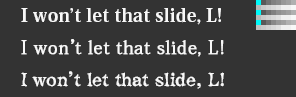
<style>
.page{position:relative;width:296px;height:97px;background:#333333}
.page>*{position:absolute;margin:0}
.t1{font:18px/32px "KozMinPro-Heavy";letter-spacing:0.022em;color:#f8f8f8}
.t2{font:18px/32px "AdobeFangsongStd-Regular";letter-spacing:0.028em;color:#f8f8f8;font-weight:bold}
.t3{font:18px/32px "AdobeFangsongStd-Regular";letter-spacing:-0.7em;color:#f8f8f8;font-weight:bold}
.t4{font:18px/32px "ComicMysteryStd-DB";letter-spacing:-0.006em;color:#f8f8f8}
.t5{font:18px/32px "ComicMysteryStd-DB";letter-spacing:-0.001em;color:#f8f8f8}
</style>
<div class="page">
<p class="t1" style="left:21px;top:8px;width:203px;height:81px">I won’t let that slide, L!<br><span class="t2">I won</span><span class="t3">’</span><span class="t2">t let that slide, L!<br></span><span class="t4">I won</span><span class="t5">’</span><span class="t4">t let that slide, L!</span></p>
</div>
